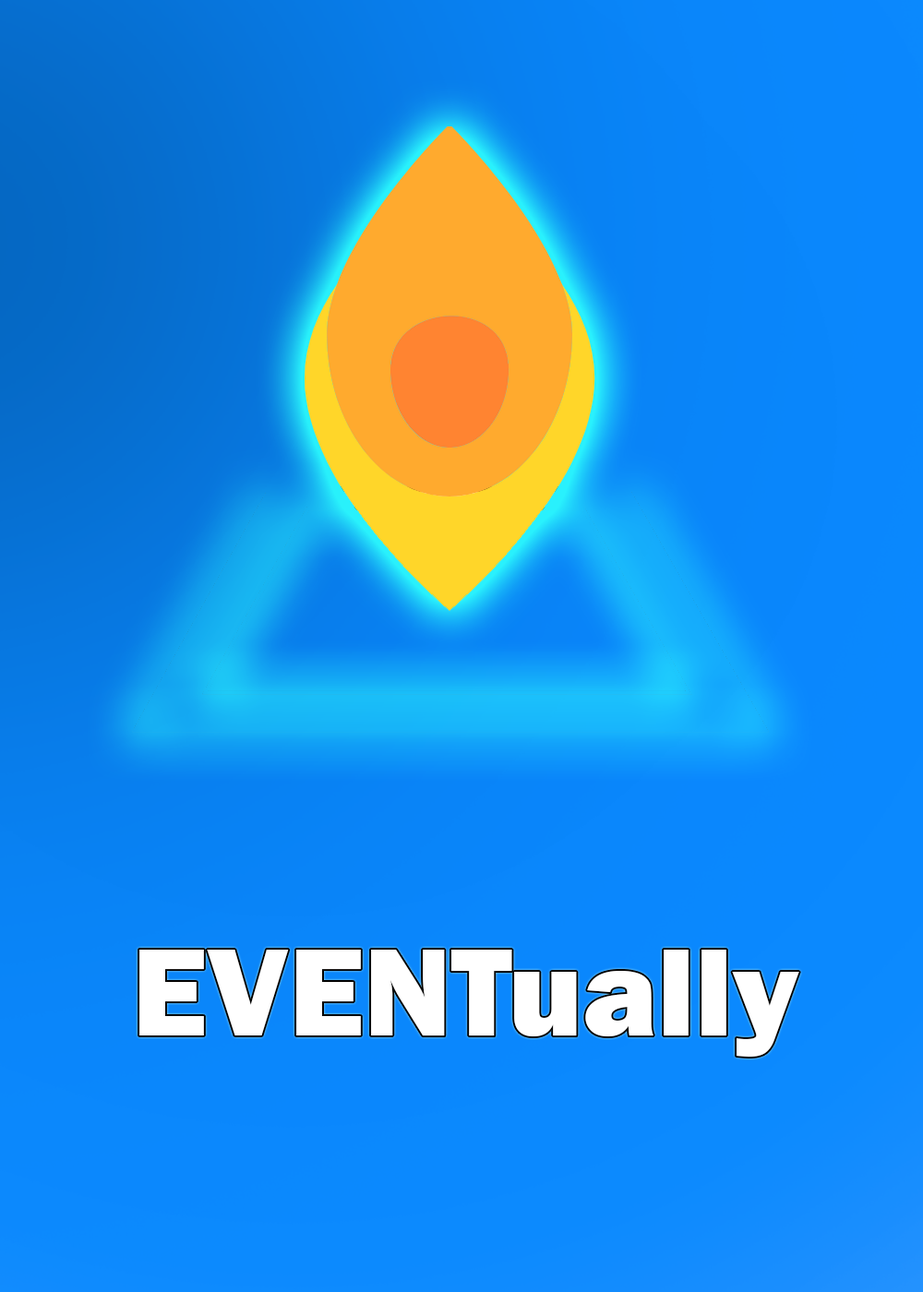
<style>
.page{position:relative;width:923px;height:1292px}
.page>*{position:absolute;margin:0}
.t1{font:128.2px "FranklinGothic-Heavy";color:#ffffff}
</style>
<div class="page">
<p class="t1" style="left:139px;top:950px;width:660px;height:107px">EVENTually</p>
</div>
